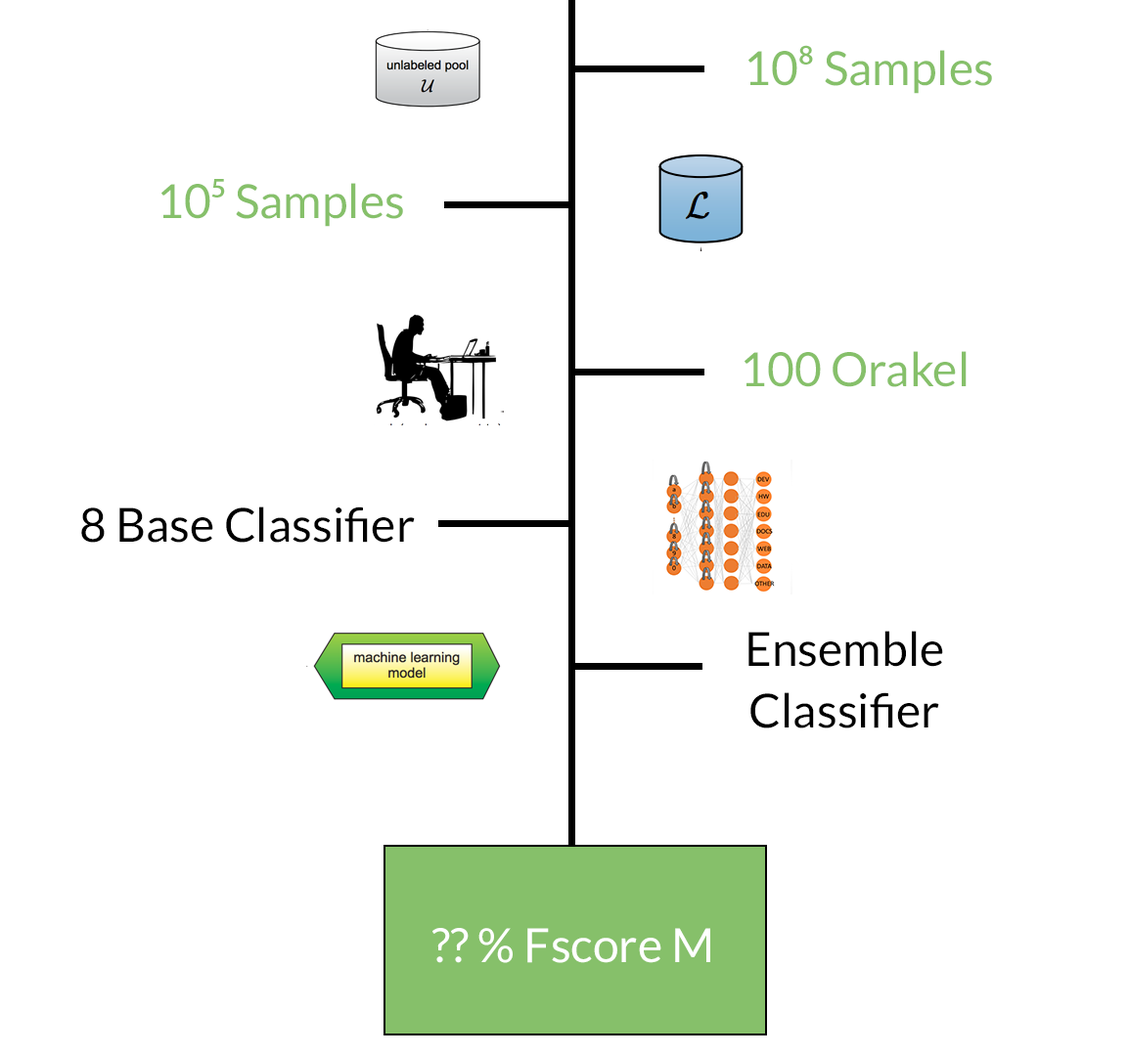
<style>
.page{position:relative;width:1129px;height:1056px;background:#ffffff}
.page>*{position:absolute;margin:0}
.t1{font:47px "Lato-Regular";color:#86c06a}
.t2{font:47px "MyriadPro-Regular";color:#86c06a}
.t3{font:47px "Lato-Regular";color:#000000}
.t4{font:47px "Lato-Regular";color:#ffffff}
</style>
<div class="page">
<p class="t1" style="left:748px;top:45px;width:244px;height:49px">10<span class="t2">⁸ </span>Samples</p>
<p class="t1" style="left:161px;top:179px;width:242px;height:48px">10<span class="t2">⁵</span> Samples</p>
<p class="t1" style="left:744px;top:351px;width:222px;height:36px">100 Orakel</p>
<p class="t3" style="left:81px;top:507px;width:334px;height:36px">8 Base Classifier</p>
<p class="t3" style="left:748px;top:631px;width:195px;height:98px;text-align:center">Ensemble<br>Classifier</p>
<p class="t4" style="left:432px;top:928px;width:278px;height:35px">?? % Fscore M</p>
</div>
